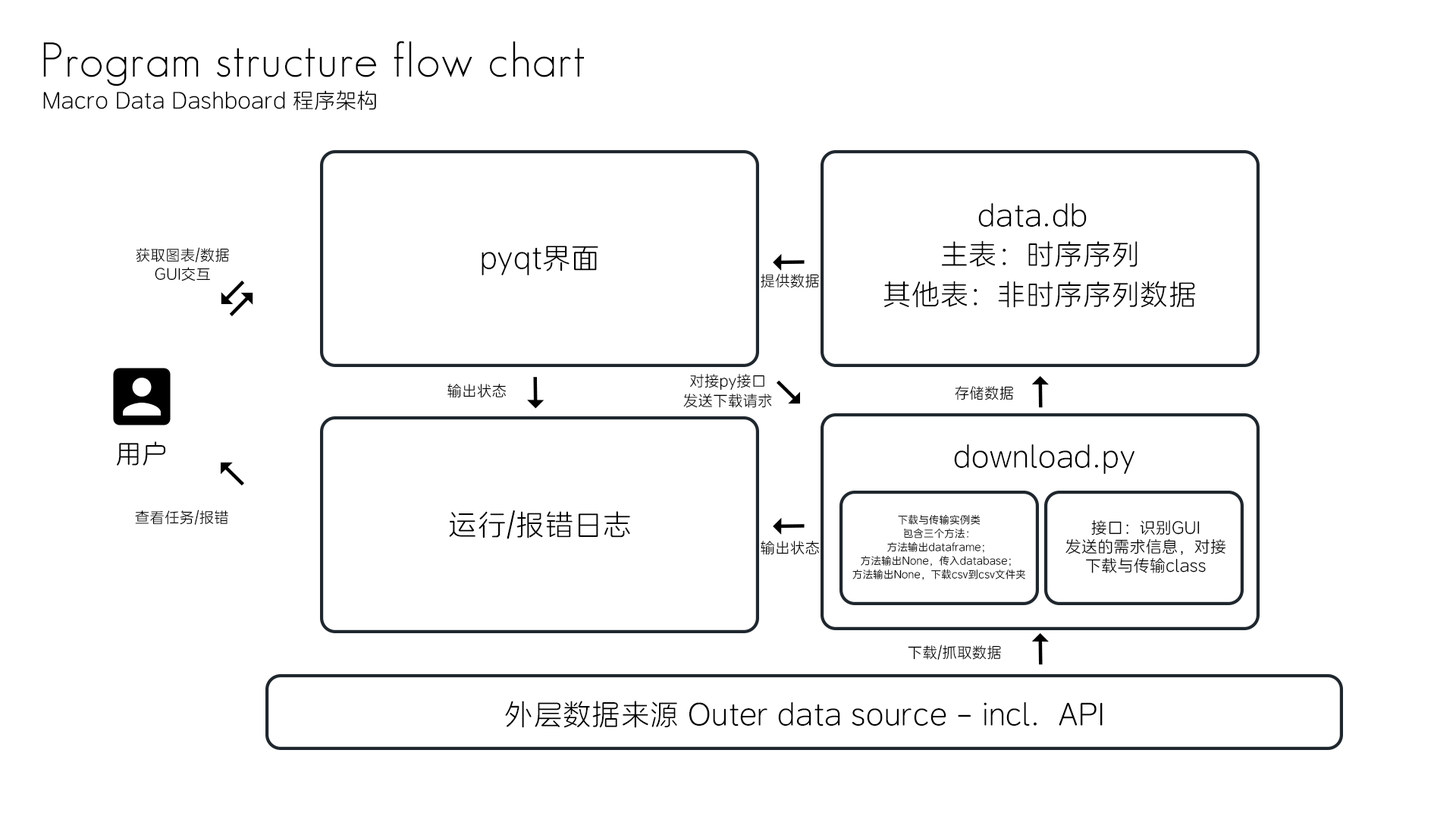
<style>
.page{position:relative;width:1456px;height:819px;background:#ffffff}
.page>*{position:absolute;margin:0}
.t1{font:47.7px "GeosansLight";letter-spacing:0.02em;color:#000000}
.t2{font:21px "AlibabaHealthFont20CN-45R";letter-spacing:0.02em;color:#000000}
.t3{font:28.5px "AlibabaHealthFont20CN-45R";letter-spacing:0.02em;color:#000000}
.t4{font:28px "AlibabaHealthFont20CN-45R";letter-spacing:0.02em;color:#000000}
.t5{font:14.6px/19.5px "AlibabaHealthFont20CN-45R";letter-spacing:0.02em;color:#000000}
.t6{font:14.6px "AlibabaHealthFont20CN-45R";letter-spacing:0.02em;color:#000000}
.t7{font:25.9px "AlibabaHealthFont20CN-45R";letter-spacing:0.02em;color:#000000}
.t8{font:10.2px/13.5px "AlibabaHealthFont20CN-45R";letter-spacing:0.02em;color:#000000}
.t9{font:15.8px/19px "AlibabaHealthFont20CN-45R";letter-spacing:0.02em;color:#000000}
</style>
<div class="page">
<p class="t1" style="left:43px;top:41px;width:541px;height:45px">Program structure flow chart</p>
<p class="t2" style="left:43px;top:90px;width:333px;height:21px">Macro Data Dashboard 程序架构</p>
<p class="t3" style="left:978px;top:203px;width:109px;height:24px">data.db</p>
<p class="t3" style="left:482px;top:246px;width:116px;height:29px">pyqt界面</p>
<p class="t4" style="left:942px;top:240px;width:195px;height:27px">主表：时序序列</p>
<p class="t5" style="left:136px;top:247px;width:93px;height:34px;text-align:center">获取图表/数据<br>GUI交互</p>
<p class="t6" style="left:761px;top:274px;width:58px;height:14px">提供数据</p>
<p class="t4" style="left:883px;top:281px;width:313px;height:27px">其他表：非时序序列数据</p>
<p class="t5" style="left:683px;top:373px;width:89px;height:35px;text-align:center">对接py接口<br>发送下载请求</p>
<p class="t6" style="left:447px;top:384px;width:60px;height:14px">输出状态</p>
<p class="t6" style="left:955px;top:386px;width:59px;height:14px">存储数据</p>
<p class="t7" style="left:117px;top:441px;width:49px;height:25px">用户</p>
<p class="t3" style="left:954px;top:444px;width:180px;height:30px">download.py</p>
<p class="t6" style="left:135px;top:510px;width:93px;height:15px">查看任务/报错</p>
<p class="t3" style="left:449px;top:510px;width:181px;height:29px">运行/报错日志</p>
<p class="t8" style="left:852px;top:514px;width:173px;height:66px;text-align:center">下载与传输实例类<br>包含三个方法：<br>方法输出dataframe；<br>方法输出None，传入database；<br>方法输出None，下载csv到csv文件夹</p>
<p class="t9" style="left:1065px;top:519px;width:161px;height:54px;text-align:center">接口：识别GUI<br>发送的需求信息，对接<br>下载与传输class</p>
<p class="t6" style="left:761px;top:541px;width:59px;height:14px">输出状态</p>
<p class="t6" style="left:908px;top:645px;width:93px;height:15px">下载/抓取数据</p>
<p class="t3" style="left:505px;top:701px;width:598px;height:27px">外层数据来源 Outer data source - incl.  API</p>
</div>
